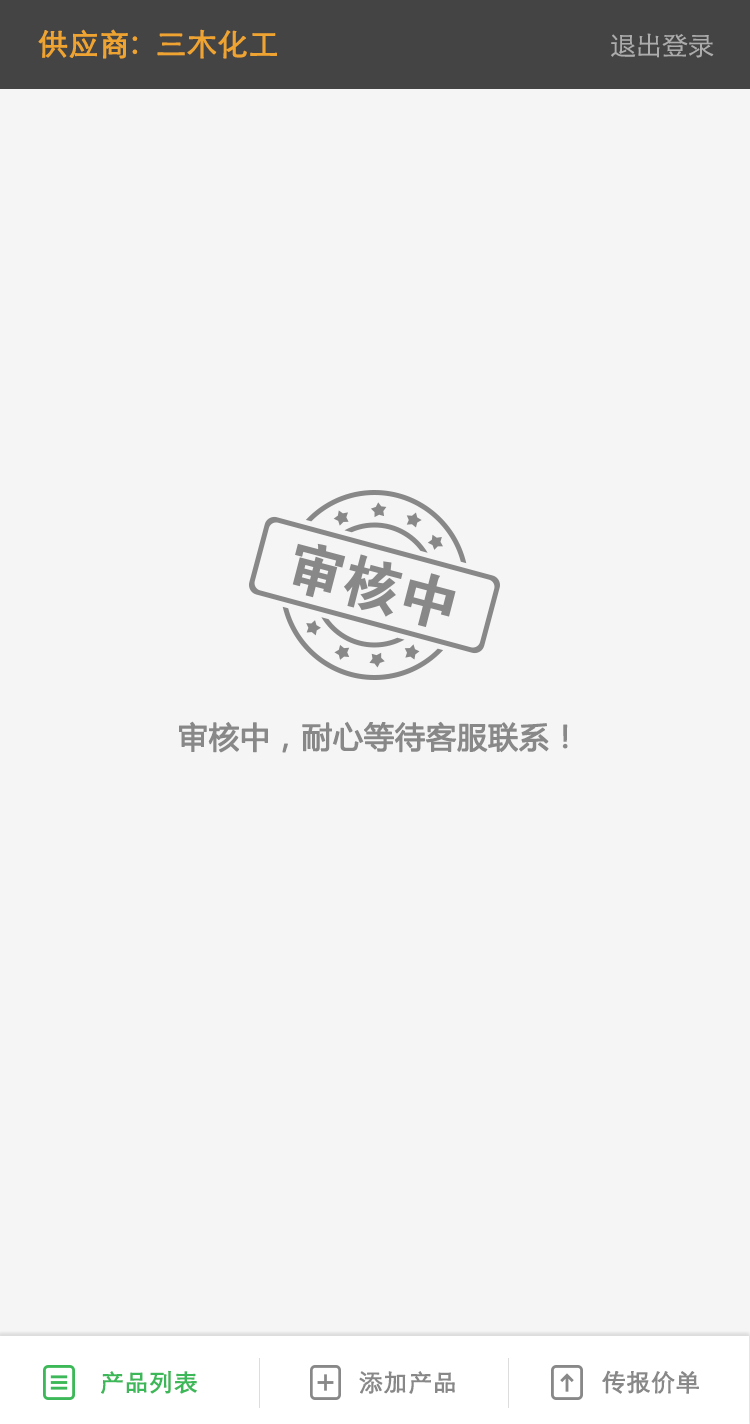
<style>
.page{position:relative;width:750px;height:1424px;background:#f5f5f5}
.page>*{position:absolute;margin:0}
.t1{font:30px "STXihei";color:#efa431;font-weight:bold}
.t2{font:26px "STXihei";color:#acacac}
.t3{font:30px "MicrosoftYaHei";letter-spacing:0.01em;color:#888888;font-weight:bold}
.t4{font:24px "STXihei";color:#3db858;font-weight:bold}
.t5{font:24px "STXihei";color:#888888;font-weight:bold}
</style>
<div class="page">
<p class="t1" style="left:38px;top:29px;width:239px;height:30px">供应商:  三木化工</p>
<p class="t2" style="left:611px;top:33px;width:103px;height:25px">退出登录</p>
<p class="t3" style="left:179px;top:721px;width:389px;height:32px">审核中，耐心等待客服联系！</p>
<p class="t4" style="left:101px;top:1370px;width:96px;height:24px">产品列表</p>
<p class="t5" style="left:359px;top:1371px;width:96px;height:23px">添加产品</p>
<p class="t5" style="left:602px;top:1370px;width:97px;height:24px">传报价单</p>
</div>
